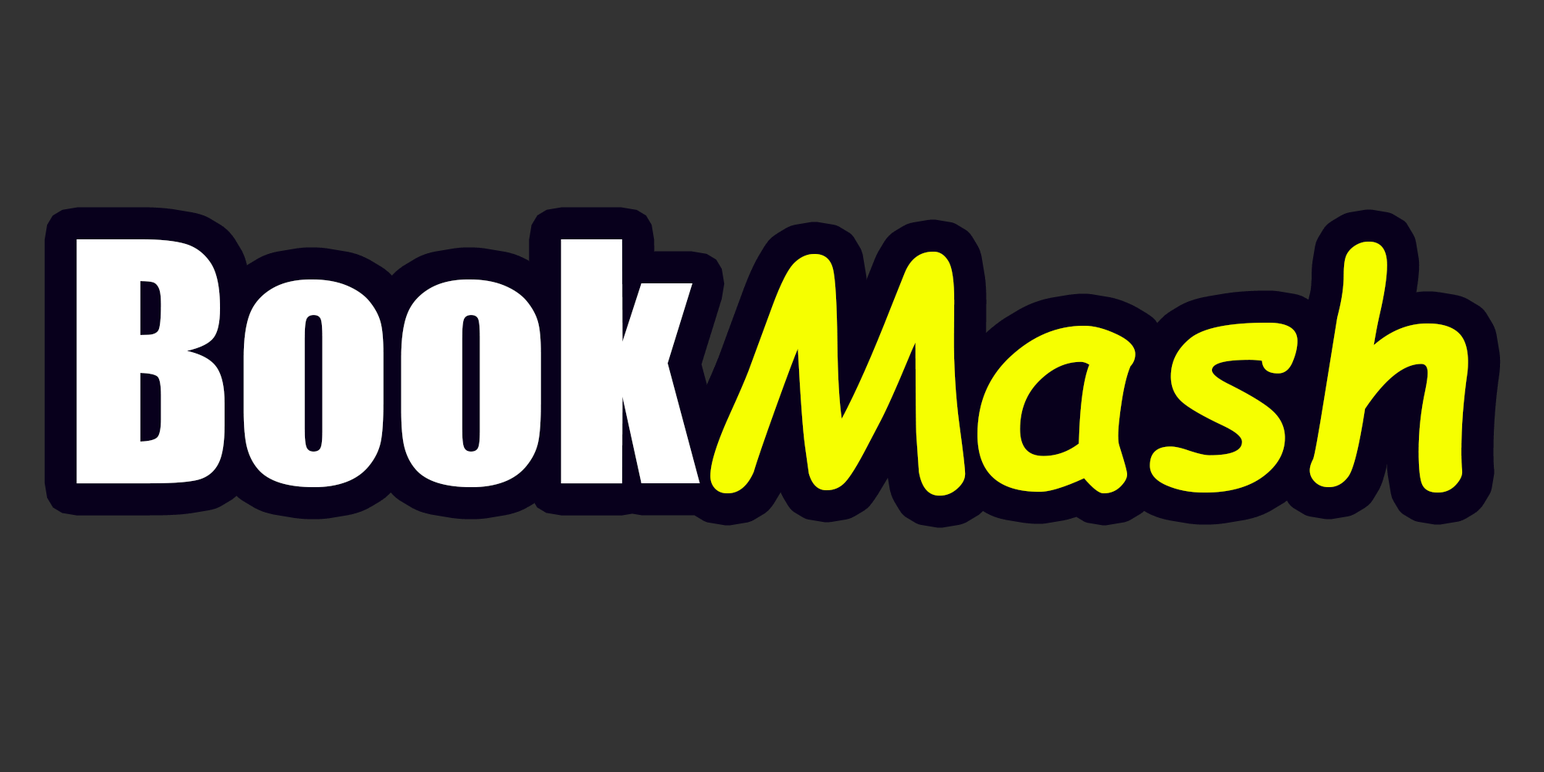
<style>
.page{position:relative;width:1544px;height:772px;background:#333333}
.page>*{position:absolute;margin:0}
.t1{font:308.9px "Impact";color:#ffffff}
.t2{font:308.9px "ComicSansMS-BoldItalic";color:#f6ff00}
</style>
<div class="page">
<p class="t1" style="left:76px;top:239px;width:1393px;height:257px">Book<span class="t2">Mash</span></p>
</div>
